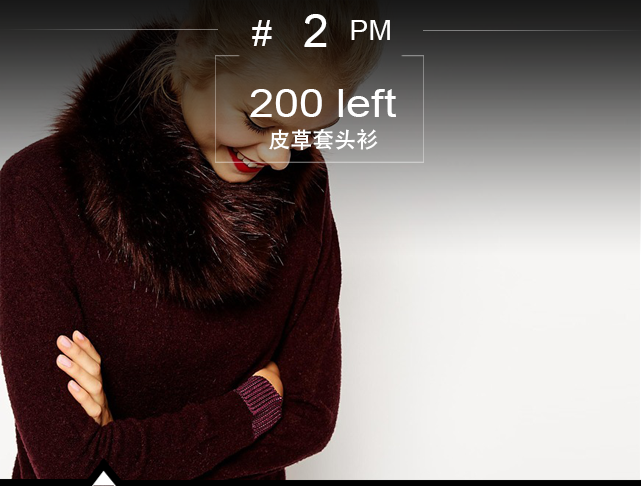
<style>
.page{position:relative;width:641px;height:486px}
.page>*{position:absolute;margin:0}
.t1{font:46.2px "ArialMT";color:#ffffff}
.t2{font:36.1px "ArialMT";color:#ffffff}
.t3{font:28.1px "ArialMT";color:#ffffff}
.t4{font:39.4px "ArialMT";color:#ffffff;scale:1.14 1}
.t5{font:22.1px "AdobeHeitiStd-Regular";color:#ffffff}
</style>
<div class="page">
<p class="t1" style="left:304px;top:14px;width:23px;height:33px">2</p>
<p class="t2" style="left:252px;top:20px;width:20px;height:26px">#</p>
<p class="t3" style="left:351px;top:20px;width:39px;height:20px">PM</p>
<p class="t4" style="left:250px;top:89px;width:146px;height:28px">200 left</p>
<p class="t5" style="left:269px;top:129px;width:109px;height:21px">皮草套头衫</p>
</div>
